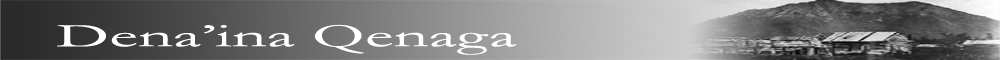
<style>
.page{position:relative;width:1000px;height:60px}
.page>*{position:absolute;margin:0}
.t1{font:33px "Garamond";color:#ffffff;scale:2.08 1}
</style>
<div class="page">
<p class="t1" style="left:57px;top:24px;width:460px;height:31px">Dena’ina Qenaga</p>
</div>
